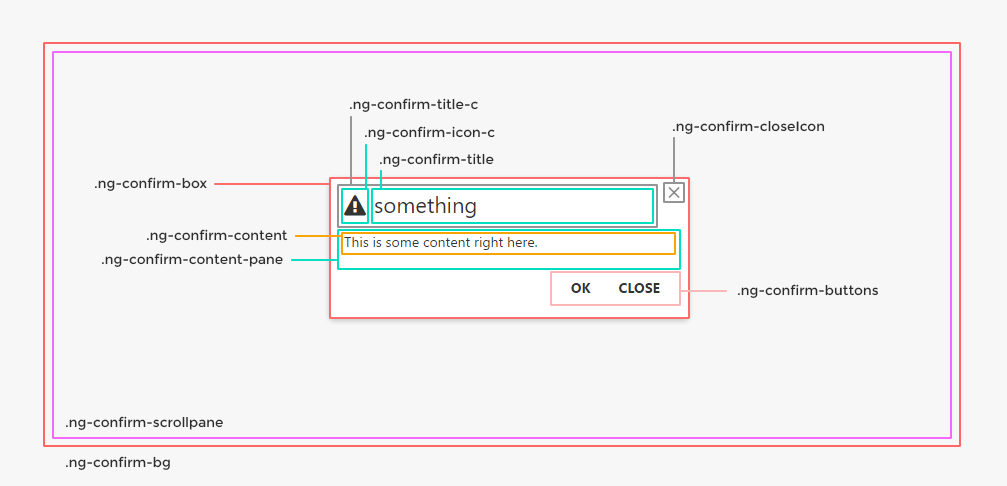
<style>
.page{position:relative;width:1007px;height:486px;background:#f7f7f7}
.page>*{position:absolute;margin:0}
.t1{font:13.6px "Montserrat-Regular";color:#2e2e2e}
</style>
<div class="page">
<p class="t1" style="left:350px;top:98px;width:128px;height:14px">.ng-confirm-title-c</p>
<p class="t1" style="left:365px;top:126px;width:130px;height:14px">.ng-confirm-icon-c</p>
<p class="t1" style="left:673px;top:120px;width:152px;height:14px">.ng-confirm-closeIcon</p>
<p class="t1" style="left:380px;top:153px;width:114px;height:14px">.ng-confirm-title</p>
<p class="t1" style="left:95px;top:177px;width:112px;height:14px">.ng-confirm-box</p>
<p class="t1" style="left:147px;top:229px;width:141px;height:14px">.ng-confirm-content</p>
<p class="t1" style="left:102px;top:253px;width:181px;height:14px">.ng-confirm-content-pane</p>
<p class="t1" style="left:738px;top:284px;width:140px;height:14px">.ng-confirm-buttons</p>
<p class="t1" style="left:66px;top:416px;width:157px;height:14px">.ng-confirm-scrollpane</p>
<p class="t1" style="left:66px;top:456px;width:104px;height:14px">.ng-confirm-bg</p>
</div>
